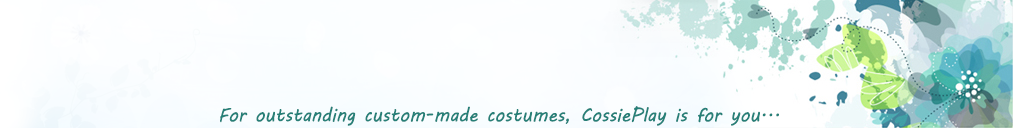
<style>
.page{position:relative;width:1013px;height:128px}
.page>*{position:absolute;margin:0}
.t1{font:19px "MVBoli";color:#278078}
</style>
<div class="page">
<p class="t1" style="left:220px;top:106px;width:559px;height:20px">For outstanding custom-made costumes, CossiePlay is for you...</p>
</div>
